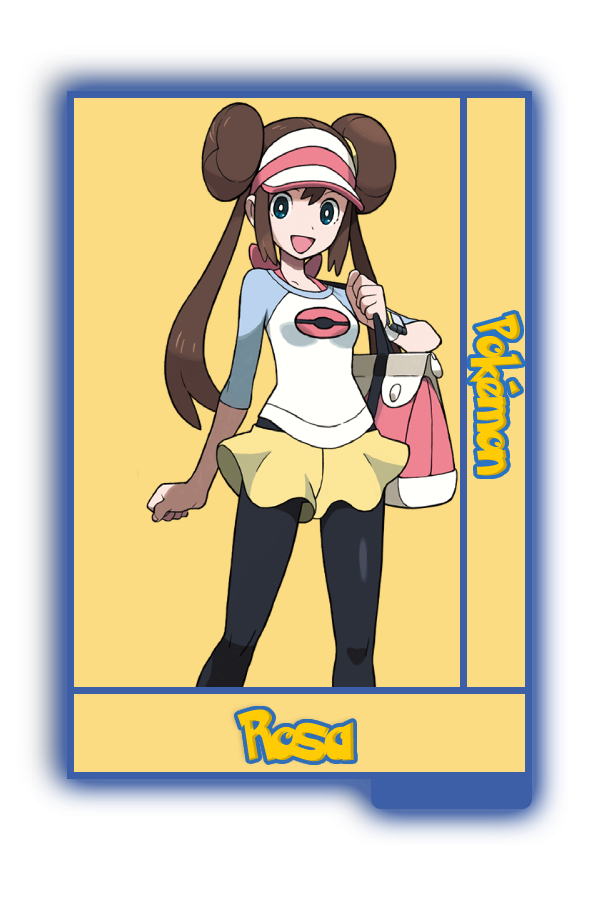
<style>
.page{position:relative;width:600px;height:900px;background:#fbdc83}
.page>*{position:absolute;margin:0}
.t1{font:48.8px "PokemonSolidNormal";color:#ffcb05;scale:0.8 1}
.t2{font:56.6px "PokemonSolidNormal";color:#ffcb05;scale:0.92 1}
</style>
<div class="page">
<p class="t1" style="left:469px;top:313px;width:54px;height:163px;rotate:90deg">Pokémon</p>
<p class="t2" style="left:237px;top:709px;width:117px;height:53px">Rosa</p>
</div>
